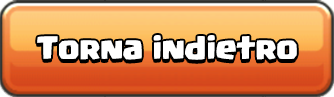
<style>
.page{position:relative;width:334px;height:97px}
.page>*{position:absolute;margin:0}
.t1{font:24px "Supercell-Magic";color:#ffffff}
</style>
<div class="page">
<p class="t1" style="left:37px;top:35px;width:260px;height:25px">Torna indietro</p>
</div>
